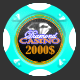
<style>
.page{position:relative;width:80px;height:80px;background:#333333}
.page>*{position:absolute;margin:0}
.t1{font:10.8px/3.6px "EdwardianScriptITC";color:#fda047}
.t2{font:6.3px/5.4px "Castellar";color:#fda047;scale:1.5 1}
.t3{font:10.6px "BernardMT-Condensed";color:#e19012;scale:1.12 1}
</style>
<div class="page">
<p class="t1" style="left:19px;top:30px;width:41px;height:14px;text-align:justify">Diamond<br><span class="t2">CASINO</span></p>
<p class="t3" style="left:25px;top:45px;width:30px;height:10px">2000$</p>
</div>
